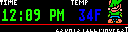
<style>
.page{position:relative;width:128px;height:32px;background:#000000}
.page>*{position:absolute;margin:0}
.t1{font:8px "Pixelated";color:#ffffff}
.t2{font:16px "AtariST8x16SystemFont";color:#1eff00}
.t3{font:16px "AtariST8x16SystemFont";color:#0000ff}
</style>
<div class="page">
<p class="t1" style="left:0px;top:0px;width:17px;height:5px">TIME</p>
<p class="t1" style="left:71px;top:0px;width:17px;height:5px">TEMP</p>
<p class="t2" style="left:2px;top:9px;width:62px;height:12px">12:09 PM</p>
<p class="t3" style="left:79px;top:9px;width:22px;height:12px">34F</p>
<p class="t1" style="left:56px;top:27px;width:72px;height:5px">23 DAYS TILL MAGFEST</p>
</div>
